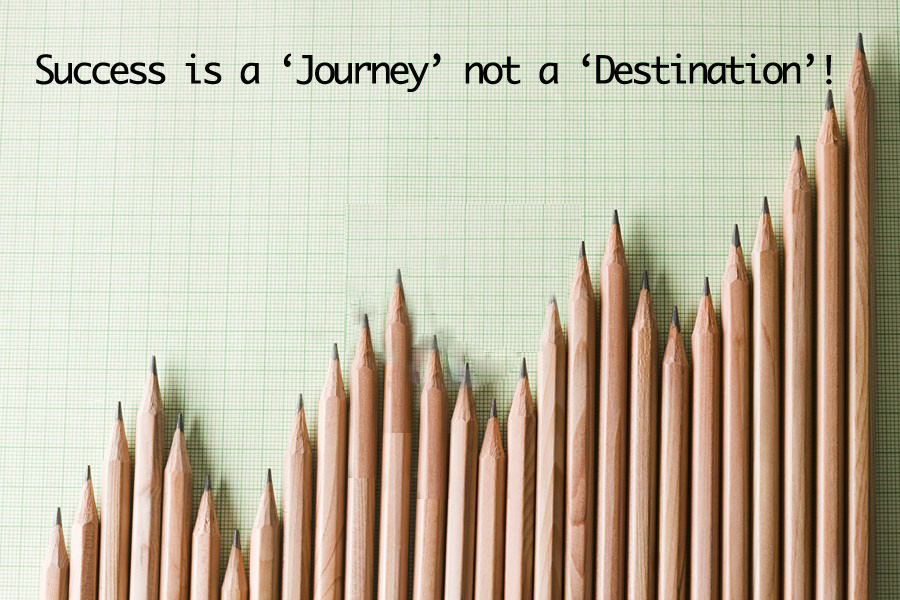
<style>
.page{position:relative;width:900px;height:600px}
.page>*{position:absolute;margin:0}
.t1{font:37.3px "Monaco";letter-spacing:-0.1em;color:#050505}
</style>
<div class="page">
<p class="t1" style="left:36px;top:53px;width:796px;height:39px">Success is a ‘Journey’ not a ‘Destination’!</p>
</div>
